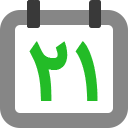
<style>
.page{position:relative;width:128px;height:128px;background:#ffffff}
.page>*{position:absolute;margin:0}
.t1{font:82.5px "BTrafficBold";letter-spacing:0.03em;color:#23bc27}
</style>
<div class="page">
<p class="t1" style="left:29px;top:41px;width:69px;height:60px">21</p>
</div>
